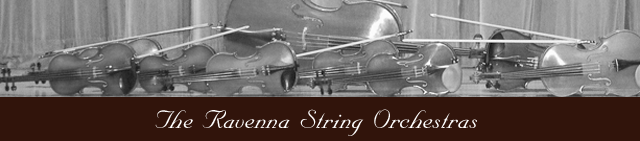
<style>
.page{position:relative;width:640px;height:141px;background:#31140b}
.page>*{position:absolute;margin:0}
.t1{font:30px "NuptialScript";color:#ffffff}
</style>
<div class="page">
<p class="t1" style="left:155px;top:109px;width:322px;height:27px">The  Ravenna  String  Orchestras</p>
</div>
